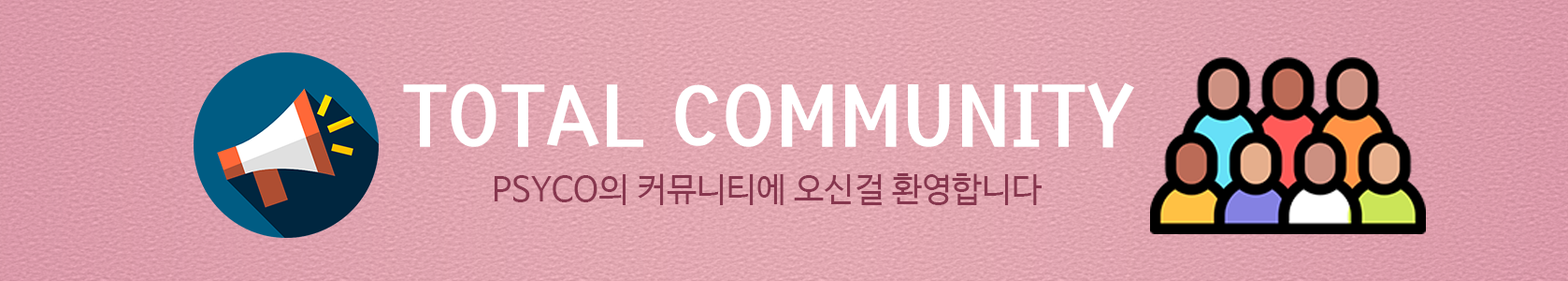
<style>
.page{position:relative;width:1568px;height:281px}
.page>*{position:absolute;margin:0}
.t1{font:93.5px "HoonPinkpungchaR";color:#ffffff}
.t2{font:33.7px "NanumBarunGothic";color:#87364d}
</style>
<div class="page">
<p class="t1" style="left:403px;top:82px;width:731px;height:66px">TOTAL COMMUNITY</p>
<p class="t2" style="left:495px;top:173px;width:547px;height:32px">PSYCO의 커뮤니티에 오신걸 환영합니다</p>
</div>
